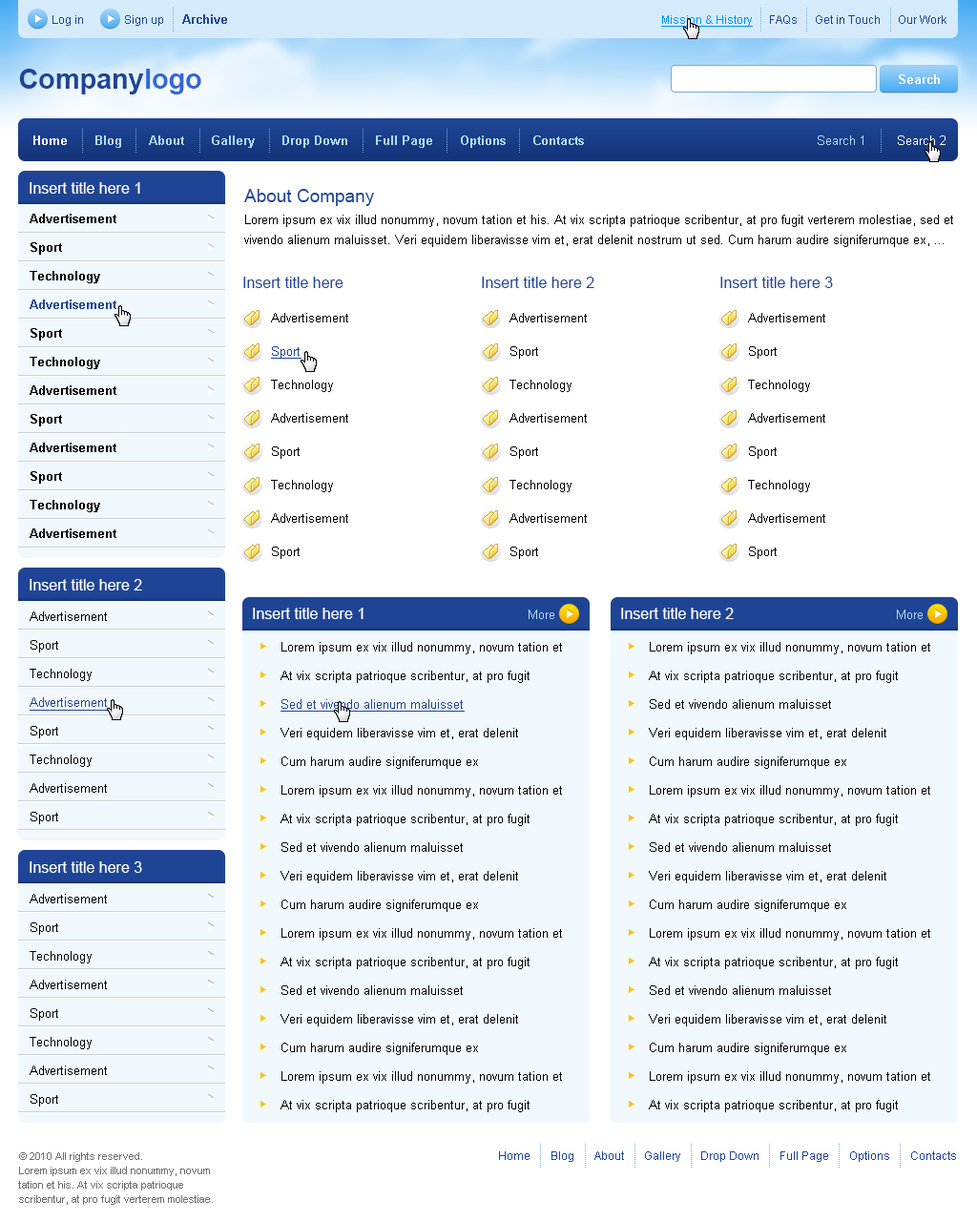
<style>
.page{position:relative;width:977px;height:1221px;background:#ffffff}
.page>*{position:absolute;margin:0}
.t1{font:11.4px "ArialMT";color:#1e4595}
.t2{font:12.4px "Arial-BoldMT";color:#1e4595}
.t3{font:11.4px "ArialMT";color:#0092ff;text-decoration:underline}
.t4{font:27.5px "Arial-BoldMT";color:#1e4595}
.t5{font:27.5px "Arial-BoldMT";color:#2f68dc}
.t6{font:12.4px "Arial-BoldMT";color:#ffffff}
.t7{font:12.4px "Arial-BoldMT";color:#b0dbfa}
.t8{font:12.4px "ArialMT";color:#b0dbfa}
.t9{font:12.4px "ArialMT";color:#ffffff}
.t10{font:15.3px "ArialMT";color:#fefefe}
.t11{font:18.1px "ArialMT";color:#1e4595}
.t12{font:12.4px/28.6px "Arial-BoldMT";color:#000000}
.t13{font:12.4px/28.6px "Arial-BoldMT";color:#1e4595}
.t14{font:12.4px/20px "ArialMT";color:#000000}
.t15{font:15.3px "ArialMT";color:#1e4595}
.t16{font:12.4px/33.4px "ArialMT";color:#000000}
.t17{font:12.4px/33.4px "ArialMT";color:#1e4595;text-decoration:underline}
.t18{font:12.4px/28.6px "ArialMT";color:#000000}
.t19{font:12.4px/28.6px "ArialMT";color:#1e4595;text-decoration:underline}
.t20{font:15.3px "ArialMT";color:#ffffff}
.t21{font:12.4px/28.6px "ArialMT";color:#010101}
.t22{font:10.5px/14.3px "ArialMT";color:#6c6c6c}
</style>
<div class="page">
<p class="t1" style="left:52px;top:15px;width:111px;height:11px">Log in              Sign up</p>
<p class="t2" style="left:182px;top:14px;width:45px;height:10px">Archive</p>
<p class="t1" style="left:661px;top:15px;width:285px;height:12px"><span class="t3">Mission &amp; History    </span>  FAQs      Get in Touch      Our Work</p>
<p class="t4" style="left:19px;top:69px;width:182px;height:25px">Company<span class="t5">logo</span></p>
<p class="t6" style="left:898px;top:74px;width:42px;height:10px">Search</p>
<p class="t7" style="left:33px;top:135px;width:551px;height:13px"><span class="t6">Home       </span>Blog       About       Gallery       Drop Down       Full Page       Options       Contacts</p>
<p class="t8" style="left:817px;top:135px;width:128px;height:10px">Search 1        <span class="t9">Search 2</span></p>
<p class="t10" style="left:30px;top:182px;width:110px;height:12px">Insert title here 1</p>
<p class="t11" style="left:244px;top:189px;width:130px;height:17px">About Company</p>
<p class="t12" style="left:30px;top:214px;width:86px;height:324px">Advertisement<br>Sport<br>Technology<br><span class="t13">Advertisement<br></span>Sport<br>Technology<br>Advertisement<br>Sport<br>Advertisement<br>Sport<br>Technology<br>Advertisement</p>
<p class="t14" style="left:244px;top:215px;width:709px;height:32px">Lorem ipsum ex vix illud nonummy, novum tation et his. At vix scripta patrioque scribentur, at pro fugit verterem molestiae, sed et vivendo alienum maluisset. Veri equidem liberavisse vim et, erat delenit nostrum ut sed. Cum harum audire signiferumque ex, …</p>
<p class="t15" style="left:243px;top:277px;width:100px;height:11px">Insert title here</p>
<p class="t15" style="left:482px;top:277px;width:112px;height:11px">Insert title here 2</p>
<p class="t15" style="left:720px;top:277px;width:113px;height:11px">Insert title here 3</p>
<p class="t16" style="left:271px;top:313px;width:77px;height:246px">Advertisement<br><span class="t17">Sport<br></span>Technology<br>Advertisement<br>Sport<br>Technology<br>Advertisement<br>Sport</p>
<p class="t16" style="left:509px;top:313px;width:78px;height:246px">Advertisement<br>Sport<br>Technology<br>Advertisement<br>Sport<br>Technology<br>Advertisement<br>Sport</p>
<p class="t16" style="left:748px;top:313px;width:77px;height:246px">Advertisement<br>Sport<br>Technology<br>Advertisement<br>Sport<br>Technology<br>Advertisement<br>Sport</p>
<p class="t10" style="left:30px;top:579px;width:112px;height:11px">Insert title here 2</p>
<p class="t18" style="left:30px;top:611px;width:79px;height:213px">Advertisement<br>Sport<br>Technology<br><span class="t19">Advertisement<br></span>Sport<br>Technology<br>Advertisement<br>Sport</p>
<p class="t20" style="left:253px;top:608px;width:110px;height:11px">Insert title here 1</p>
<p class="t8" style="left:528px;top:609px;width:26px;height:10px">More</p>
<p class="t20" style="left:621px;top:608px;width:112px;height:11px">Insert title here 2</p>
<p class="t8" style="left:897px;top:609px;width:25px;height:10px">More</p>
<p class="t18" style="left:280px;top:642px;width:282px;height:470px">Lorem ipsum ex vix illud nonummy, novum tation et<br>At vix scripta patrioque scribentur, at pro fugit<br><span class="t19">Sed et vivendo alienum maluisset<br></span>Veri equidem liberavisse vim et, erat delenit<br>Cum harum audire signiferumque ex<br>Lorem ipsum ex vix illud nonummy, novum tation et<br>At vix scripta patrioque scribentur, at pro fugit<br>Sed et vivendo alienum maluisset<br>Veri equidem liberavisse vim et, erat delenit<br>Cum harum audire signiferumque ex<br>Lorem ipsum ex vix illud nonummy, novum tation et<br>At vix scripta patrioque scribentur, at pro fugit<br>Sed et vivendo alienum maluisset<br>Veri equidem liberavisse vim et, erat delenit<br>Cum harum audire signiferumque ex<br>Lorem ipsum ex vix illud nonummy, novum tation et<br>At vix scripta patrioque scribentur, at pro fugit</p>
<p class="t18" style="left:649px;top:642px;width:281px;height:470px">Lorem ipsum ex vix illud nonummy, novum tation et<br>At vix scripta patrioque scribentur, at pro fugit<br>Sed et vivendo alienum maluisset<br>Veri equidem liberavisse vim et, erat delenit<br>Cum harum audire signiferumque ex<br>Lorem ipsum ex vix illud nonummy, novum tation et<br>At vix scripta patrioque scribentur, at pro fugit<br>Sed et vivendo alienum maluisset<br>Veri equidem liberavisse vim et, erat delenit<br>Cum harum audire signiferumque ex<br>Lorem ipsum ex vix illud nonummy, novum tation et<br>At vix scripta patrioque scribentur, at pro fugit<br>Sed et vivendo alienum maluisset<br>Veri equidem liberavisse vim et, erat delenit<br>Cum harum audire signiferumque ex<br>Lorem ipsum ex vix illud nonummy, novum tation et<br>At vix scripta patrioque scribentur, at pro fugit</p>
<p class="t10" style="left:30px;top:861px;width:112px;height:12px">Insert title here 3</p>
<p class="t21" style="left:30px;top:894px;width:77px;height:212px">Advertisement<br>Sport<br>Technology<br>Advertisement<br>Sport<br>Technology<br>Advertisement<br>Sport</p>
<p class="t22" style="left:18px;top:1152px;width:195px;height:53px">© 2010 All rights reserved. <br>Lorem ipsum ex vix illud nonummy, novum<br>tation et his. At vix scripta patrioque<br>scribentur, at pro fugit verterem molestiae.</p>
<p class="t1" style="left:499px;top:1151px;width:457px;height:11px">Home       Blog       About       Gallery       Drop Down       Full Page       Options       Contacts</p>
</div>
